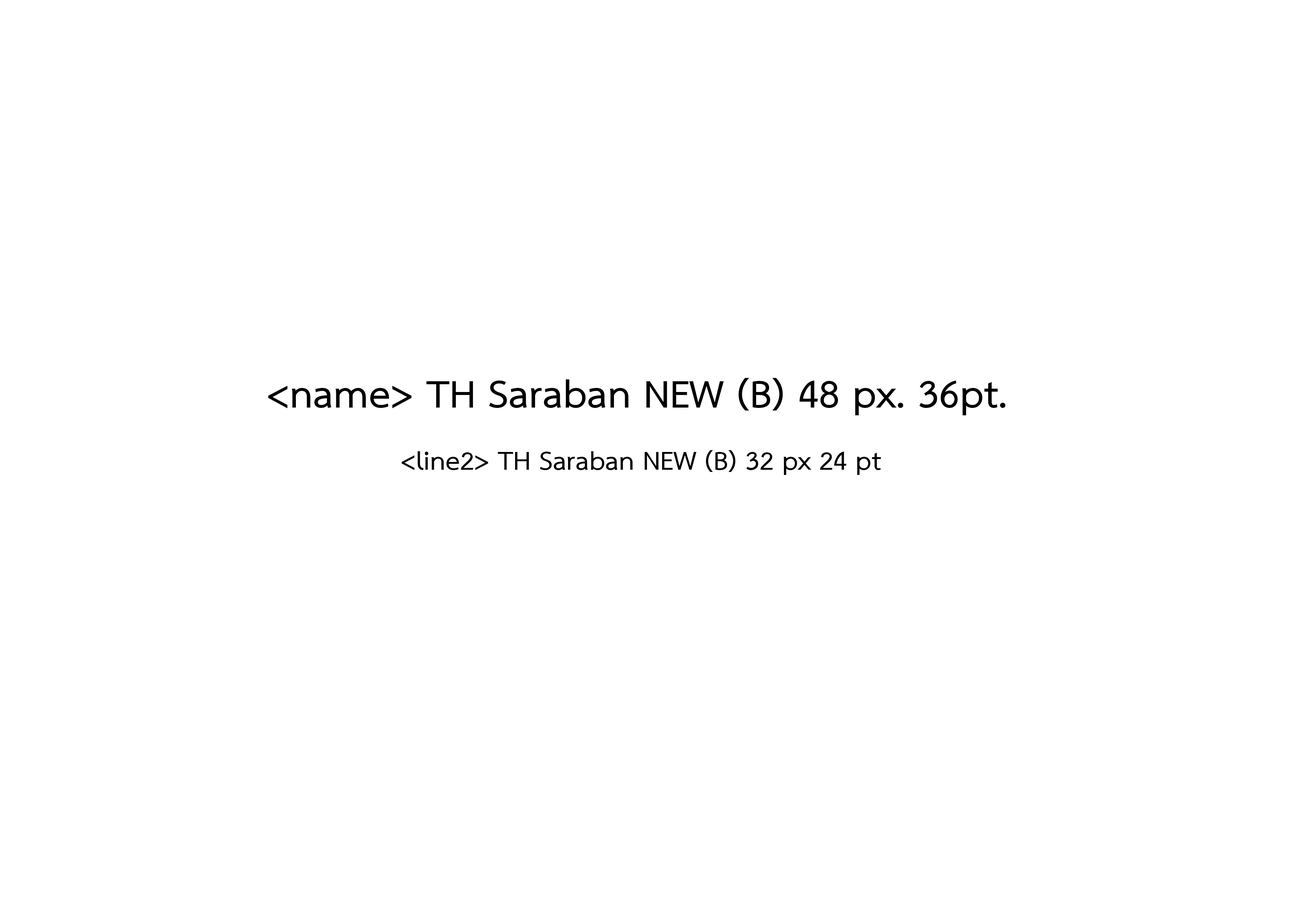
<style>
.page{position:relative;width:1299px;height:918px;background:#ffffff}
.page>*{position:absolute;margin:0}
.t1{font:55.5px "THSarabunNew-Bold";color:#000000}
.t2{font:37px "THSarabunNew-Bold";color:#000000}
</style>
<div class="page">
<p class="t1" style="left:268px;top:378px;width:738px;height:37px">&lt;name&gt; TH Saraban NEW (B) 48 px. 36pt.</p>
<p class="t2" style="left:401px;top:450px;width:480px;height:25px">&lt;line2&gt; TH Saraban NEW (B) 32 px 24 pt</p>
</div>
